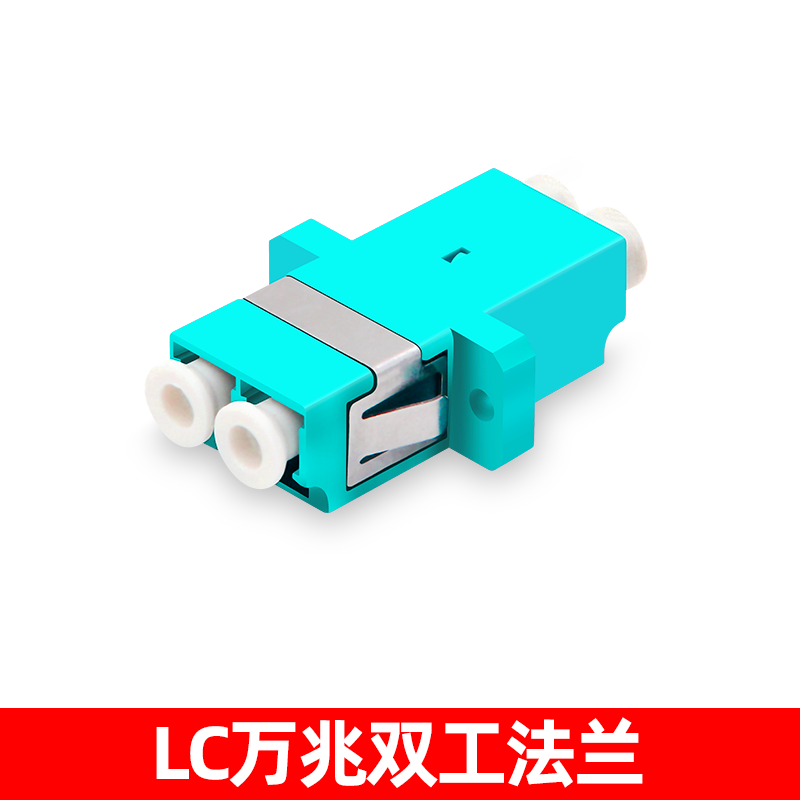
<style>
.page{position:relative;width:800px;height:800px;background:#ffffff}
.page>*{position:absolute;margin:0}
.t1{font:75px "AlibabaPuHuiTi-Bold";letter-spacing:-0.06em;color:#ffffff;text-transform:uppercase}
</style>
<div class="page">
<p class="t1" style="left:156px;top:717px;width:487px;height:71px">LC万兆双工法兰</p>
</div>
